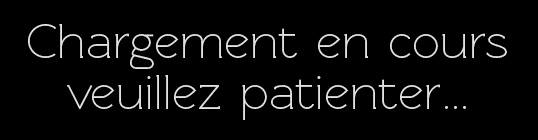
<style>
.page{position:relative;width:538px;height:140px;background:#000000}
.page>*{position:absolute;margin:0}
.t1{font:50px/51px "RawengulkRegular";color:#e1e1e1}
</style>
<div class="page">
<p class="t1" style="left:28px;top:24px;width:479px;height:96px;text-align:center">Chargement en cours<br>veuillez patienter...</p>
</div>
